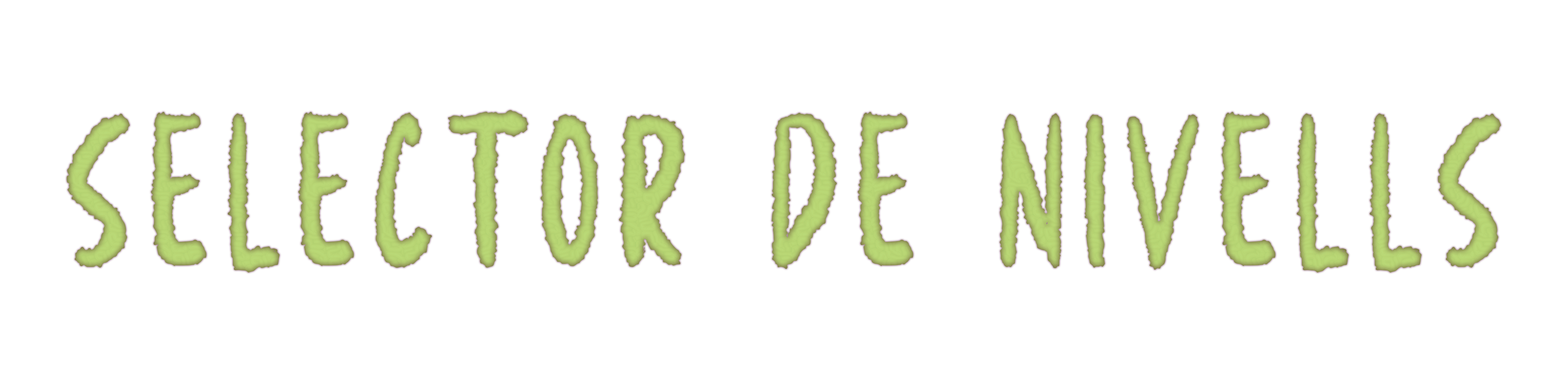
<style>
.page{position:relative;width:1568px;height:392px;background:#ffffff}
.page>*{position:absolute;margin:0}
.t1{font:163.3px "Metalien";letter-spacing:0.1em;color:#b7d974}
</style>
<div class="page">
<p class="t1" style="left:67px;top:110px;width:1434px;height:163px">Selector de nivells</p>
</div>
